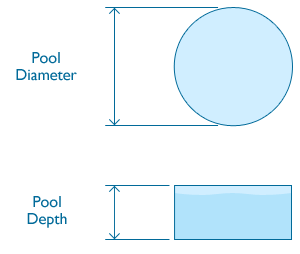
<style>
.page{position:relative;width:300px;height:254px;background:#ffffff}
.page>*{position:absolute;margin:0}
.t1{font:16px/16.8px "GillSans";color:#016a99}
</style>
<div class="page">
<p class="t1" style="left:16px;top:52px;width:61px;height:29px;text-align:center">Pool<br>Diameter</p>
<p class="t1" style="left:27px;top:196px;width:40px;height:32px;text-align:center">Pool<br>Depth</p>
</div>
